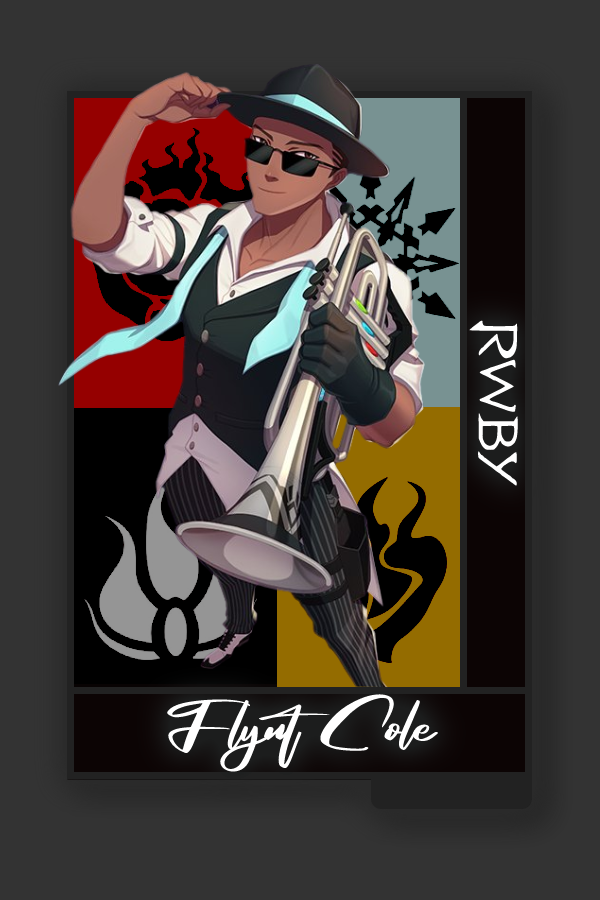
<style>
.page{position:relative;width:600px;height:900px;background:#333333}
.page>*{position:absolute;margin:0}
.t1{font:61.3px "RWBY_Style";color:#ffffff;scale:1.25 1}
.t2{font:75px "RosegaFREE";color:#ffffff}
</style>
<div class="page">
<p class="t1" style="left:469px;top:320px;width:49px;height:166px;rotate:90deg">RWBY</p>
<p class="t2" style="left:166px;top:694px;width:273px;height:83px">Flynt Cole</p>
</div>
